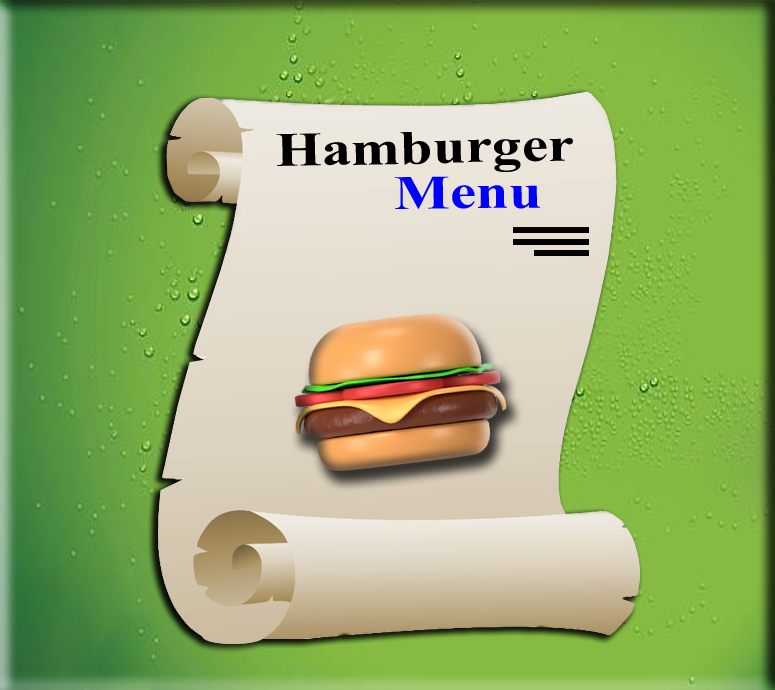
<style>
.page{position:relative;width:775px;height:690px}
.page>*{position:absolute;margin:0}
.t1{font:48px "TimesNewRomanPS-BoldMT";color:#000000;scale:1.23 1}
.t2{font:48px "TimesNewRomanPS-BoldMT";color:#0000ff;scale:1.23 1}
</style>
<div class="page">
<p class="t1" style="left:276px;top:132px;width:297px;height:40px;rotate:-1deg">Hamburger</p>
<p class="t2" style="left:394px;top:176px;width:146px;height:33px;rotate:-1deg">Menu</p>
</div>
